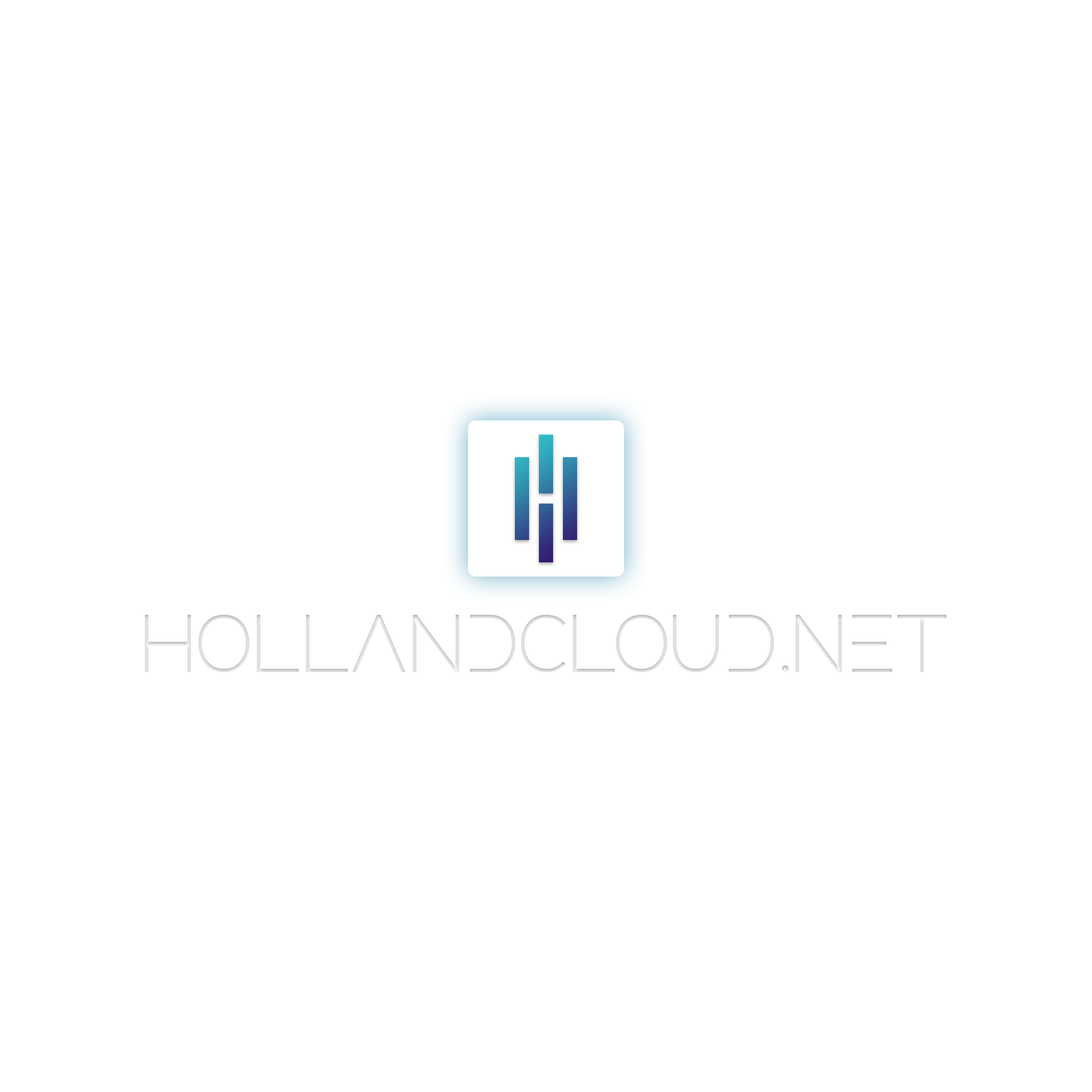
<style>
.page{position:relative;width:1092px;height:1092px;background:#ffffff}
.page>*{position:absolute;margin:0}
.t1{font:81.9px "averox";letter-spacing:-0.005em;color:#dcdcdc}
</style>
<div class="page">
<p class="t1" style="left:145px;top:615px;width:802px;height:57px">hollandcloud.net</p>
</div>
